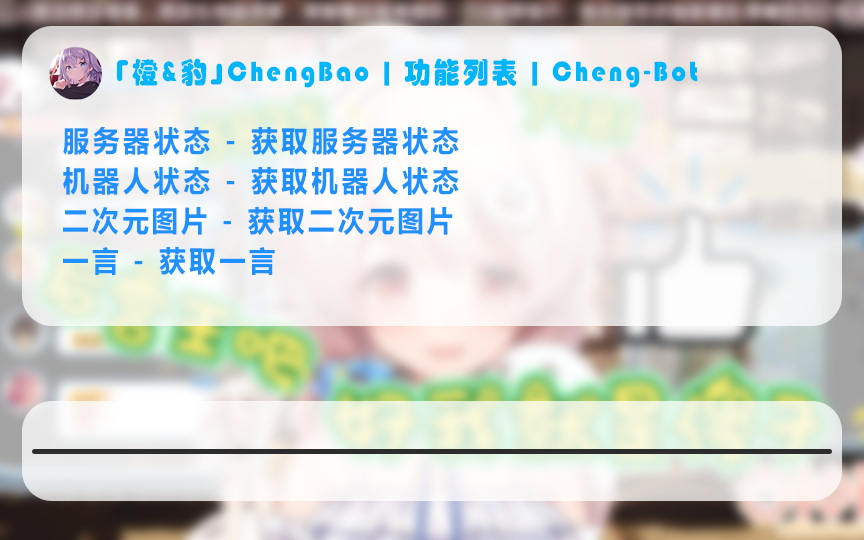
<style>
.page{position:relative;width:864px;height:540px}
.page>*{position:absolute;margin:0}
.t1{font:28.8px "STHupo";letter-spacing:0.17em;color:#00b6fa;scale:0.92 1}
.t2{font:28.8px/40px "MicrosoftYaHei-Bold";letter-spacing:0.17em;color:#1e90ff;scale:0.92 1}
</style>
<div class="page">
<p class="t1" style="left:117px;top:58px;width:581px;height:30px">「橙&amp;豹」ChengBao | 功能列表 | Cheng-Bot</p>
<p class="t2" style="left:63px;top:127px;width:396px;height:148px">服务器状态 - 获取服务器状态<br>机器人状态 - 获取机器人状态<br>二次元图片 - 获取二次元图片<br>一言 - 获取一言</p>
</div>
